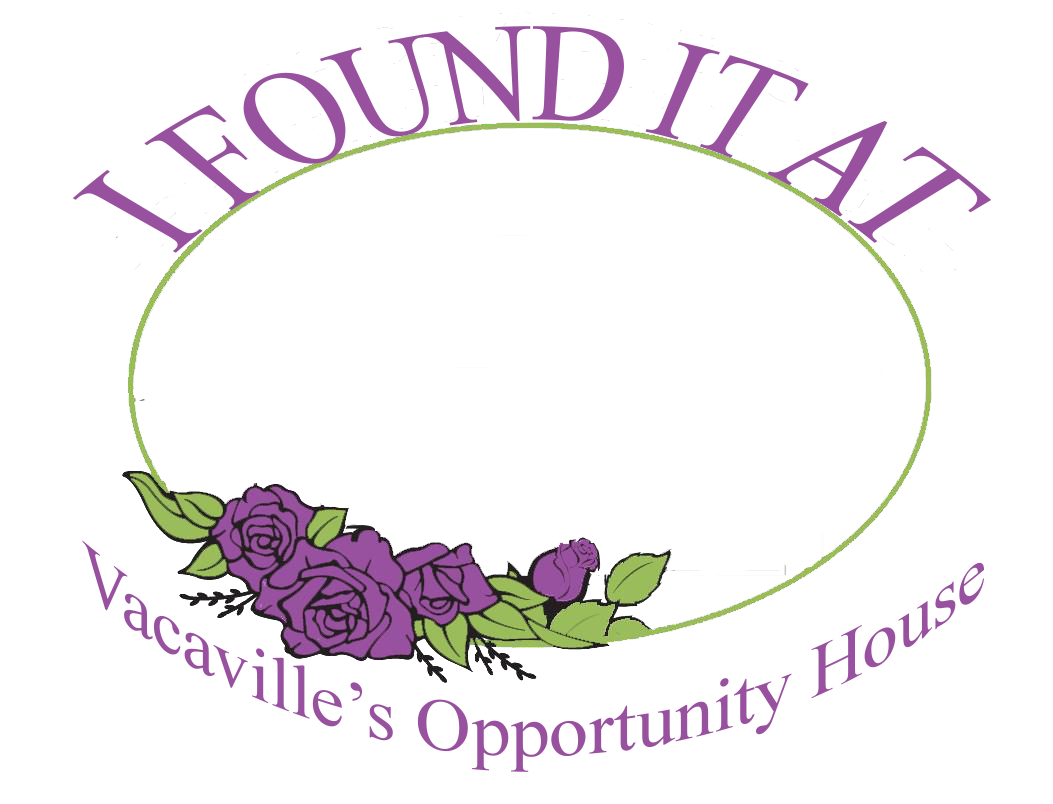
<style>
.page{position:relative;width:1053px;height:804px;background:#ffffff}
.page>*{position:absolute;margin:0}
.t1{font:106.7px "TimesNewRomanPSMT";color:#98519f}
.t2{font:73.3px "TimesNewRomanPSMT";color:#98519f}
</style>
<div class="page">
<p class="t1" style="left:72px;top:26px;width:920px;height:227px;text-align:center">I FOUND IT AT</p>
<p class="t2" style="left:82px;top:540px;width:902px;height:232px;text-align:center">Vacaville’s Opportunity House</p>
</div>
